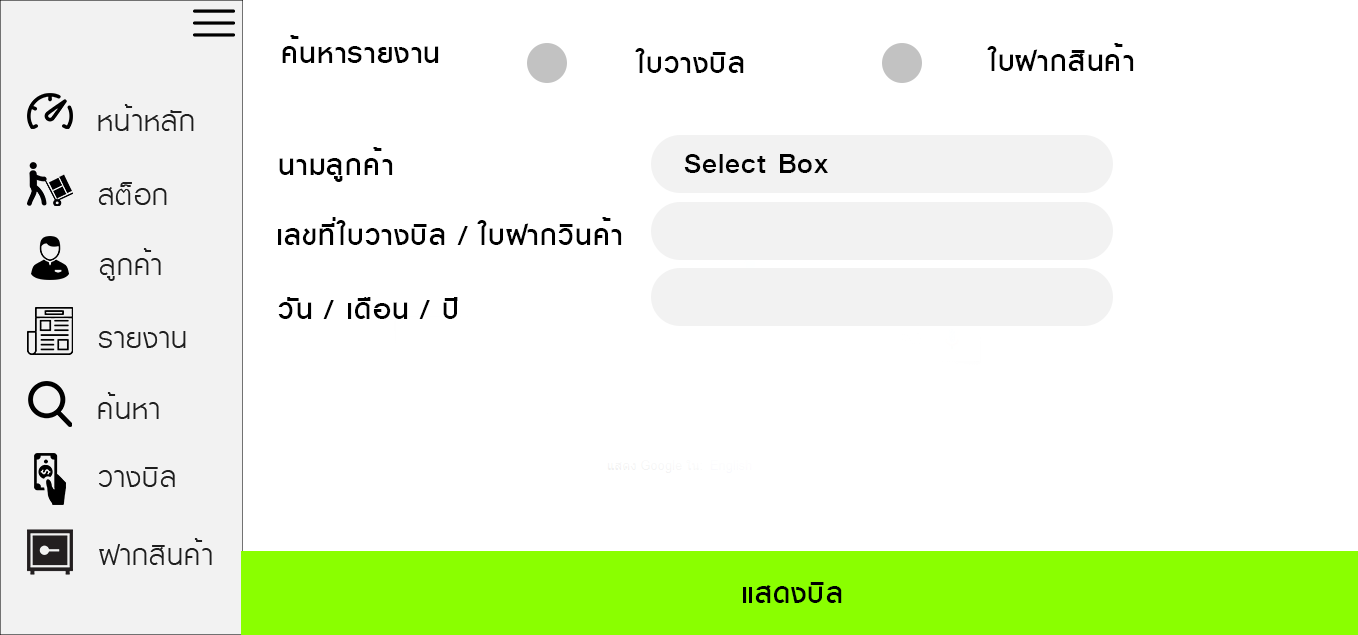
<style>
.page{position:relative;width:1358px;height:635px;background:#ffffff}
.page>*{position:absolute;margin:0}
.t1{font:40px "KittithadaMedium65P";letter-spacing:0.025em;color:#000000}
</style>
<div class="page">
<p class="t1" style="left:282px;top:35px;width:157px;height:28px">ค้นหารายงาน</p>
<p class="t1" style="left:635px;top:48px;width:109px;height:25px">ใบวางบิล</p>
<p class="t1" style="left:987px;top:43px;width:147px;height:28px">ใบฝากสินค้า</p>
<p class="t1" style="left:279px;top:147px;width:114px;height:35px">นามลูกค้า</p>
<p class="t1" style="left:684px;top:154px;width:144px;height:19px">Select Box</p>
<p class="t1" style="left:278px;top:217px;width:344px;height:28px">เลขที่ใบวางบิล / ใบฝากวินค้า</p>
<p class="t1" style="left:278px;top:297px;width:180px;height:22px">วัน / เดือน / ปี</p>
<p class="t1" style="left:743px;top:582px;width:99px;height:21px">แสดงบิล</p>
</div>
